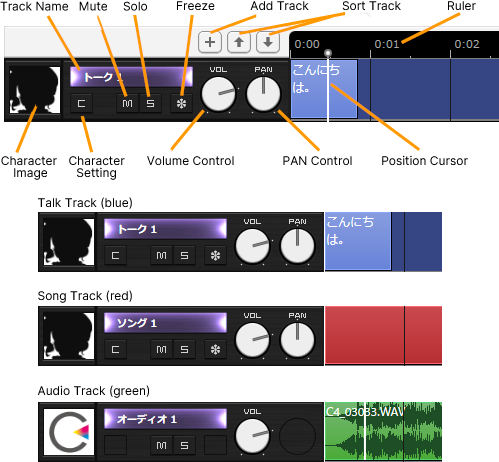
<style>
.page{position:relative;width:499px;height:462px;background:#ffffff}
.page>*{position:absolute;margin:0}
.t1{font:12px "Sarasa-Gothic-SC-Regular";color:#000000}
.t2{font:12px/12px "Sarasa-Gothic-SC-Regular";color:#000000}
</style>
<div class="page">
<p class="t1" style="left:0px;top:1px;width:68px;height:10px">Track Name</p>
<p class="t1" style="left:79px;top:1px;width:28px;height:10px">Mute</p>
<p class="t1" style="left:123px;top:1px;width:24px;height:10px">Solo</p>
<p class="t1" style="left:177px;top:1px;width:38px;height:10px">Freeze</p>
<p class="t1" style="left:250px;top:1px;width:59px;height:10px">Add Track</p>
<p class="t1" style="left:342px;top:1px;width:59px;height:10px">Sort Track</p>
<p class="t1" style="left:448px;top:1px;width:28px;height:10px">Ruler</p>
<p class="t2" style="left:1px;top:156px;width:56px;height:24px;text-align:center">Character <br>Image</p>
<p class="t2" style="left:69px;top:156px;width:56px;height:24px;text-align:center">Character<br>Setting</p>
<p class="t1" style="left:147px;top:156px;width:87px;height:10px">Volume Control</p>
<p class="t1" style="left:283px;top:156px;width:69px;height:10px">PAN Control</p>
<p class="t1" style="left:382px;top:155px;width:86px;height:11px">Position Cursor</p>
<p class="t1" style="left:38px;top:197px;width:94px;height:12px">Talk Track (blue)</p>
<p class="t1" style="left:38px;top:290px;width:94px;height:13px">Song Track (red)</p>
<p class="t1" style="left:37px;top:385px;width:112px;height:13px">Audio Track (green)</p>
</div>
